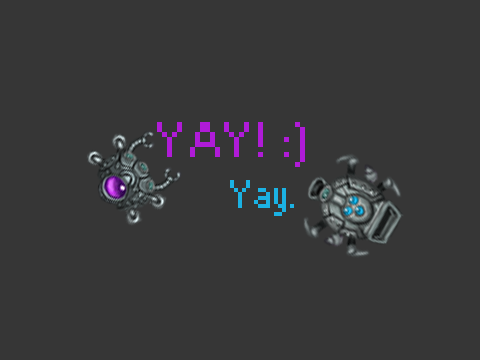
<style>
.page{position:relative;width:480px;height:360px;background:#363636}
.page>*{position:absolute;margin:0}
.t1{font:48px "Small Fonts";color:#b01bd8}
.t2{font:36px "Small Fonts";color:#1bb2e4}
</style>
<div class="page">
<p class="t1" style="left:157px;top:122px;width:148px;height:45px">Y A Y !  :)</p>
<p class="t2" style="left:230px;top:180px;width:64px;height:36px">Yay.</p>
</div>
